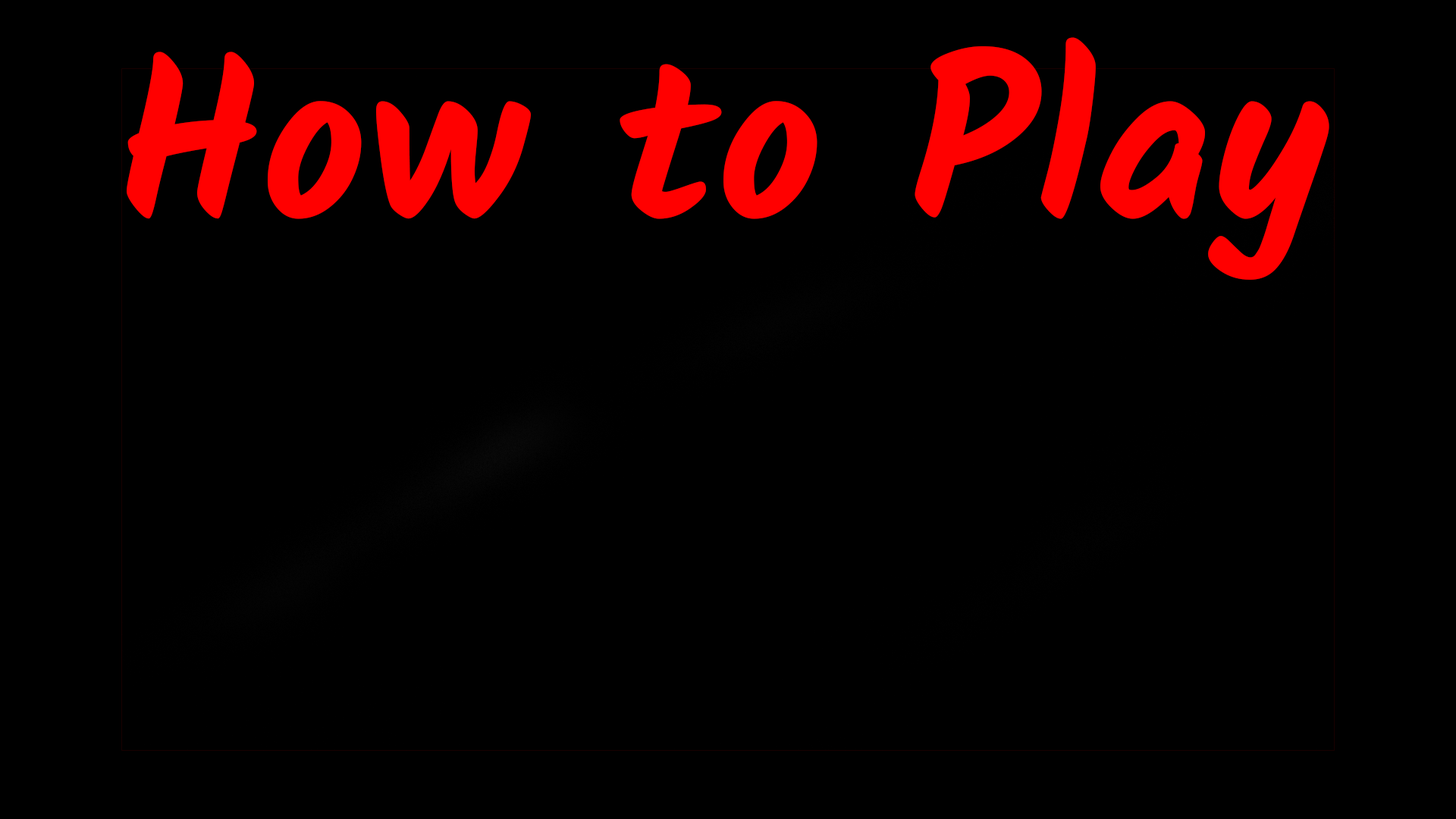
<style>
.page{position:relative;width:1456px;height:819px;background:#000000}
.page>*{position:absolute;margin:0}
.t1{font:227.5px "Kalam-Bold";color:#ff0000}
</style>
<div class="page">
<p class="t1" style="left:127px;top:37px;width:1202px;height:243px">How to Play</p>
</div>
